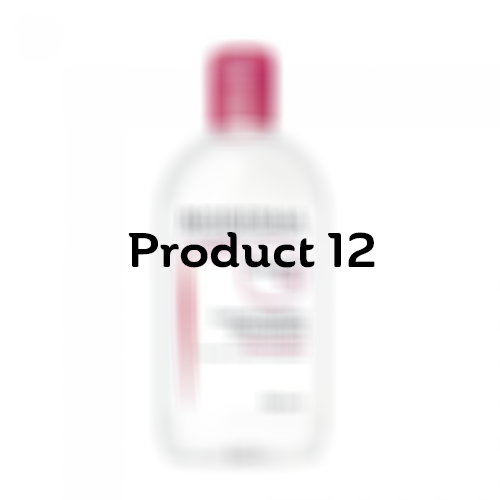
<style>
.page{position:relative;width:500px;height:500px;background:#ffffff}
.page>*{position:absolute;margin:0}
.t1{font:48px "AinslieW01-ExtBold";color:#000000}
</style>
<div class="page">
<p class="t1" style="left:128px;top:232px;width:247px;height:36px">Product 12</p>
</div>
